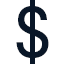
<style>
.page{position:relative;width:64px;height:64px;background:#ffffff}
.page>*{position:absolute;margin:0}
.t1{font:72.1px "Larsseit";letter-spacing:-0.18em;color:#091627}
</style>
<div class="page">
<p class="t1" style="left:16px;top:0px;width:33px;height:65px">$</p>
</div>
